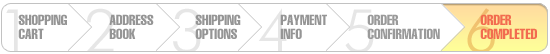
<style>
.page{position:relative;width:550px;height:54px;background:#ffffff}
.page>*{position:absolute;margin:0}
.t1{font:14px/14px "Helvetica-Compressed";color:#959595;text-transform:uppercase}
.t2{font:14px/14px "Helvetica-Compressed";color:#9a9a9a;text-transform:uppercase}
.t3{font:14px/14px "Helvetica-Compressed";color:#f26c4f;text-transform:uppercase}
</style>
<div class="page">
<p class="t1" style="left:18px;top:14px;width:49px;height:25px">shopping cart</p>
<p class="t1" style="left:109px;top:14px;width:45px;height:25px">address<br>book</p>
<p class="t1" style="left:195px;top:14px;width:46px;height:25px">shipping options</p>
<p class="t1" style="left:280px;top:14px;width:47px;height:25px">payment info</p>
<p class="t2" style="left:367px;top:14px;width:73px;height:25px">order <br>confirmation</p>
<p class="t3" style="left:480px;top:14px;width:57px;height:25px">order<br>completed</p>
</div>
